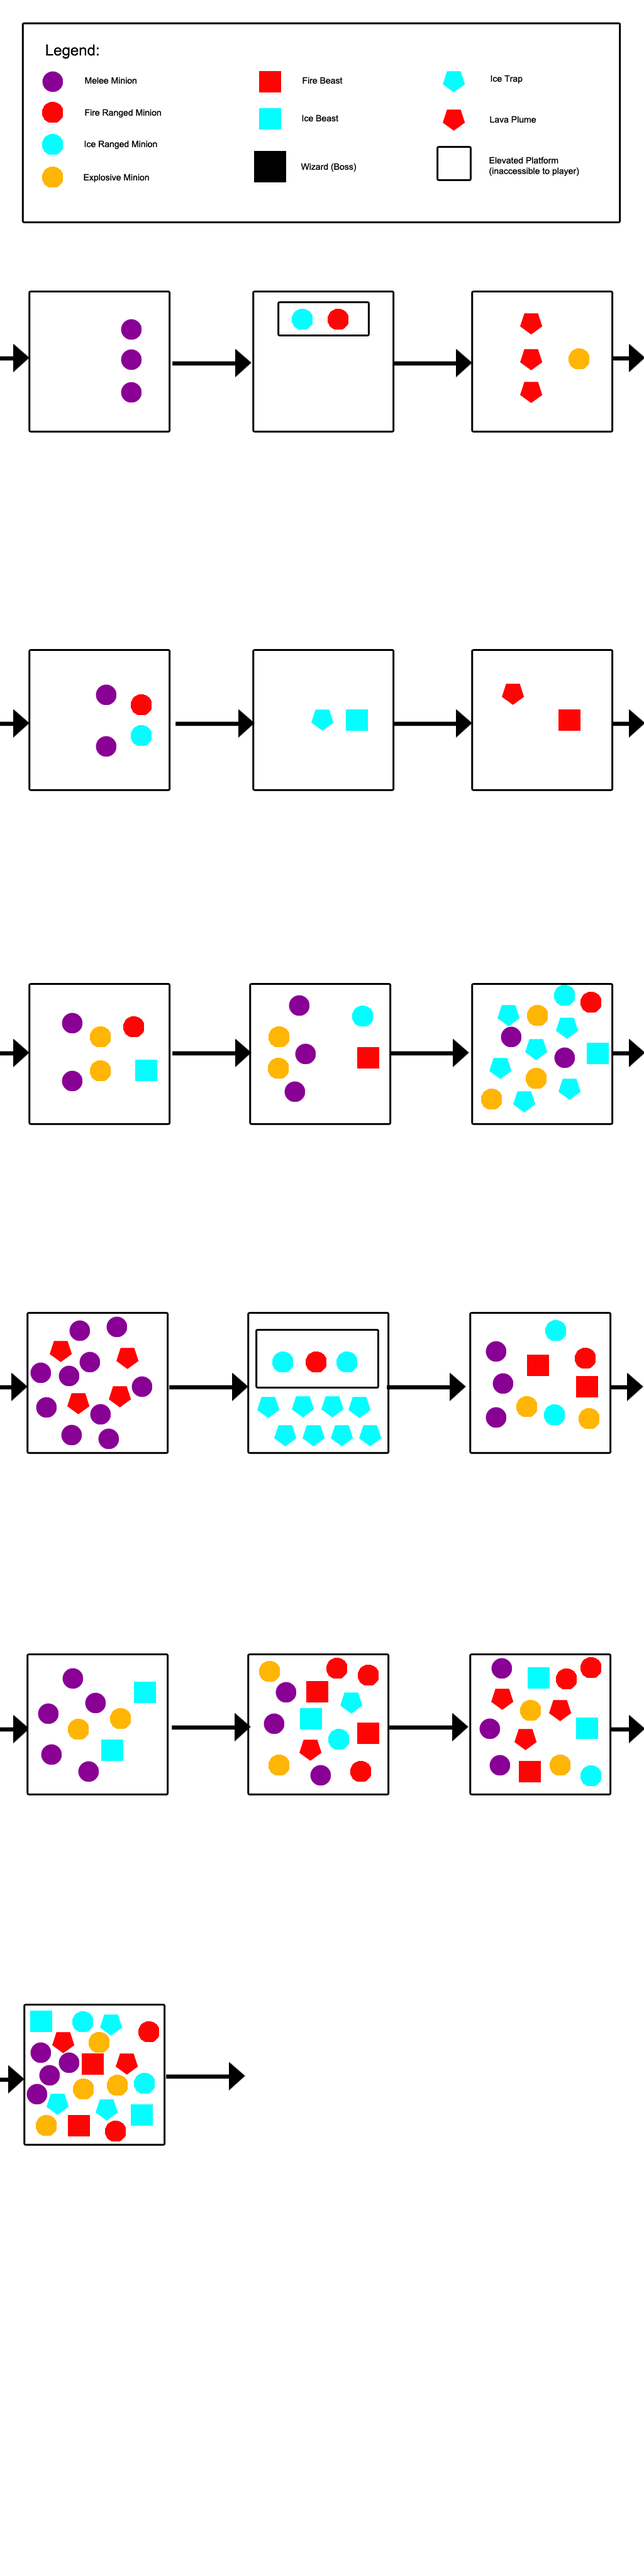
<style>
.page{position:relative;width:644px;height:2576px;background:#ffffff}
.page>*{position:absolute;margin:0}
.t1{font:15.1px "ArialMT";color:#000000}
.t2{font:8.8px "ArialMT";color:#000000}
</style>
<div class="page">
<p class="t1" style="left:46px;top:44px;width:53px;height:15px">Legend:</p>
<p class="t2" style="left:85px;top:77px;width:51px;height:7px">Melee Minion</p>
<p class="t2" style="left:303px;top:77px;width:40px;height:7px">Fire Beast</p>
<p class="t2" style="left:491px;top:75px;width:32px;height:9px">Ice Trap</p>
<p class="t2" style="left:85px;top:109px;width:76px;height:9px">Fire Ranged Minion</p>
<p class="t2" style="left:302px;top:114px;width:36px;height:8px">Ice Beast</p>
<p class="t2" style="left:490px;top:116px;width:46px;height:7px">Lava Plume</p>
<p class="t2" style="left:84px;top:140px;width:73px;height:9px">Ice Ranged Minion</p>
<p class="t2" style="left:489px;top:157px;width:90px;height:19px">Elevated Platform<br>(inaccessible to player)</p>
<p class="t2" style="left:84px;top:174px;width:65px;height:8px">Explosive Minion</p>
<p class="t2" style="left:301px;top:163px;width:55px;height:9px">Wizard (Boss)</p>
</div>
